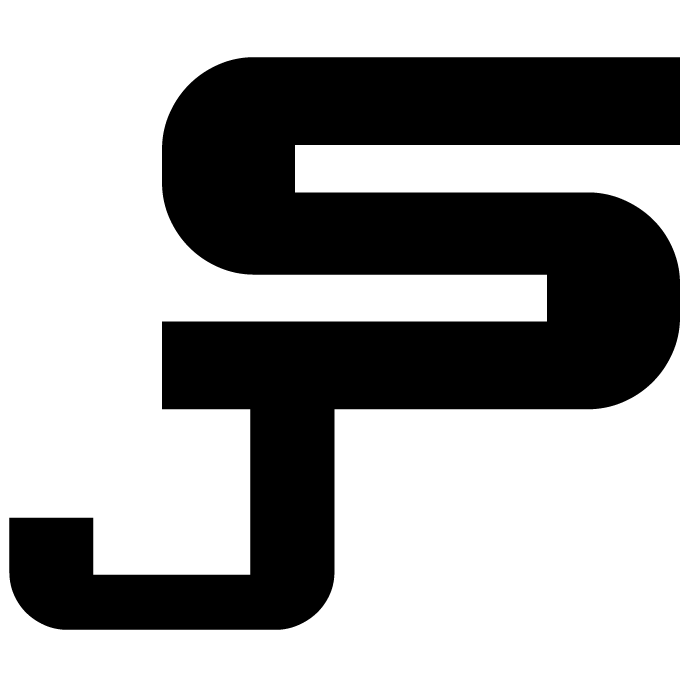
<style>
.page{position:relative;width:700px;height:700px;background:#ffffff}
.page>*{position:absolute;margin:0}
.t1{font:611.9px "Gunship";color:#000000}
.t2{font:383.6px "Gunship";color:#000000}
</style>
<div class="page">
<p class="t1" style="left:162px;top:57px;width:518px;height:353px">S</p>
<p class="t2" style="left:9px;top:409px;width:326px;height:221px">j</p>
</div>
